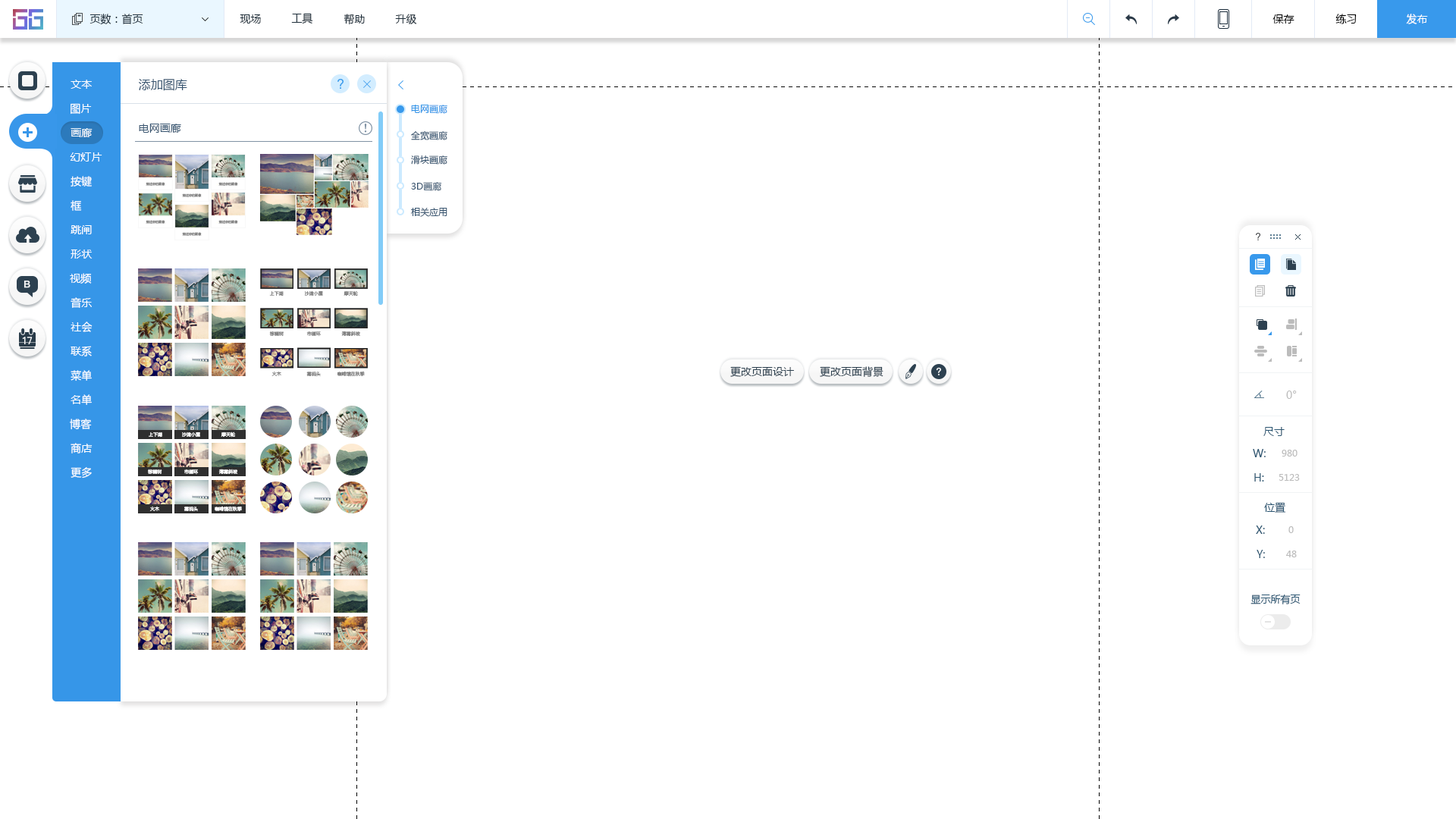
<style>
.page{position:relative;width:1456px;height:819px;background:#ffffff}
.page>*{position:absolute;margin:0}
.t1{font:10.6px "MicrosoftYaHei";color:#20303c}
.t2{font:10.6px "MicrosoftYaHei";color:#000000}
.t3{font:10.6px "MicrosoftYaHei";color:#ffffff}
.t4{font:12.1px "MicrosoftYaHei";color:#395671}
.t5{font:9.1px "MicrosoftYaHei";color:#3696e8}
.t6{font:10.6px "MicrosoftYaHei";color:#395671}
.t7{font:9.1px "MicrosoftYaHei";color:#395671}
.t8{font:3.1px "MicrosoftYaHei";color:#848484}
.t9{font:3px "MicrosoftYaHei";color:#848484}
.t10{font:4.5px "MicrosoftYaHei";color:#848484}
.t11{font:10.6px "MicrosoftYaHei";color:#2d4150}
.t12{font:10.6px "MicrosoftYaHei";color:#bcbcbc}
.t13{font:4.5px "MicrosoftYaHei";color:#fefefe}
.t14{font:10.6px "MicrosoftYaHei";color:#2b5672}
.t15{font:9.1px "MicrosoftYaHei";color:#bcbcbc}
.t16{font:9.9px "MicrosoftYaHei";color:#2b5672}
</style>
<div class="page">
<p class="t1" style="left:89px;top:14px;width:54px;height:11px">页数：首页</p>
<p class="t1" style="left:240px;top:14px;width:21px;height:10px">现场</p>
<p class="t1" style="left:291px;top:13px;width:22px;height:11px">工具</p>
<p class="t1" style="left:344px;top:14px;width:21px;height:11px">帮助</p>
<p class="t1" style="left:395px;top:14px;width:22px;height:10px">升级</p>
<p class="t2" style="left:1272px;top:14px;width:22px;height:10px">保存</p>
<p class="t2" style="left:1335px;top:14px;width:22px;height:10px">练习</p>
<p class="t3" style="left:1406px;top:14px;width:22px;height:10px">发布</p>
<p class="t3" style="left:71px;top:80px;width:21px;height:9px">文本</p>
<p class="t4" style="left:139px;top:79px;width:48px;height:12px">添加图库</p>
<p class="t3" style="left:71px;top:103px;width:21px;height:12px">图片</p>
<p class="t5" style="left:411px;top:105px;width:36px;height:9px">电网画廊</p>
<p class="t6" style="left:139px;top:124px;width:42px;height:9px">电网画廊</p>
<p class="t3" style="left:71px;top:128px;width:22px;height:9px">画廊</p>
<p class="t7" style="left:411px;top:131px;width:36px;height:9px">全宽画廊</p>
<p class="t3" style="left:70px;top:152px;width:32px;height:10px">幻灯片</p>
<p class="t7" style="left:411px;top:155px;width:36px;height:10px">滑块画廊</p>
<p class="t3" style="left:71px;top:176px;width:21px;height:11px">按键</p>
<p class="t8" style="left:146px;top:182px;width:19px;height:4px">描述你的图像</p>
<p class="t8" style="left:218px;top:182px;width:20px;height:4px">描述你的图像</p>
<p class="t7" style="left:411px;top:182px;width:31px;height:9px">3D画廊</p>
<p class="t8" style="left:182px;top:193px;width:20px;height:4px">描述你的图像</p>
<p class="t3" style="left:71px;top:200px;width:11px;height:11px">框</p>
<p class="t7" style="left:411px;top:208px;width:36px;height:9px">相关应用</p>
<p class="t9" style="left:146px;top:220px;width:19px;height:4px">描述你的图像</p>
<p class="t8" style="left:218px;top:220px;width:20px;height:4px">描述你的图像</p>
<p class="t3" style="left:71px;top:225px;width:21px;height:9px">跳闸</p>
<p class="t8" style="left:182px;top:232px;width:20px;height:4px">描述你的图像</p>
<p class="t3" style="left:71px;top:249px;width:22px;height:10px">形状</p>
<p class="t3" style="left:70px;top:273px;width:22px;height:11px">视频</p>
<p class="t10" style="left:269px;top:291px;width:15px;height:6px">上下湖</p>
<p class="t10" style="left:304px;top:291px;width:19px;height:5px">沙滩小屋</p>
<p class="t10" style="left:344px;top:290px;width:14px;height:7px">摩天轮</p>
<p class="t3" style="left:71px;top:297px;width:21px;height:11px">音乐</p>
<p class="t3" style="left:71px;top:322px;width:22px;height:10px">社会</p>
<p class="t10" style="left:269px;top:331px;width:15px;height:5px">棕榈树</p>
<p class="t10" style="left:306px;top:331px;width:15px;height:6px">市循环</p>
<p class="t10" style="left:341px;top:331px;width:19px;height:5px">薄雾斜坡</p>
<p class="t3" style="left:71px;top:346px;width:21px;height:10px">联系</p>
<p class="t3" style="left:71px;top:370px;width:21px;height:11px">菜单</p>
<p class="t10" style="left:271px;top:371px;width:10px;height:5px">火木</p>
<p class="t10" style="left:306px;top:372px;width:15px;height:4px">雾码头</p>
<p class="t10" style="left:337px;top:371px;width:28px;height:6px">咖啡馆在秋季</p>
<p class="t11" style="left:730px;top:366px;width:64px;height:11px">更改页面设计</p>
<p class="t11" style="left:820px;top:366px;width:63px;height:11px">更改页面背景</p>
<p class="t3" style="left:71px;top:394px;width:21px;height:11px">名单</p>
<p class="t12" style="left:1286px;top:391px;width:11px;height:8px">0°</p>
<p class="t3" style="left:70px;top:419px;width:22px;height:11px">博客</p>
<p class="t13" style="left:149px;top:432px;width:13px;height:6px">上下湖</p>
<p class="t13" style="left:182px;top:432px;width:18px;height:5px">沙滩小屋</p>
<p class="t13" style="left:221px;top:431px;width:15px;height:7px">摩天轮</p>
<p class="t14" style="left:1263px;top:427px;width:22px;height:9px">尺寸</p>
<p class="t3" style="left:71px;top:443px;width:22px;height:10px">商店</p>
<p class="t14" style="left:1253px;top:449px;width:13px;height:8px">W:</p>
<p class="t15" style="left:1282px;top:450px;width:15px;height:7px">980</p>
<p class="t3" style="left:71px;top:467px;width:21px;height:12px">更多</p>
<p class="t13" style="left:148px;top:469px;width:14px;height:5px">棕榈树</p>
<p class="t13" style="left:184px;top:469px;width:15px;height:6px">市循环</p>
<p class="t13" style="left:218px;top:469px;width:20px;height:5px">薄雾斜坡</p>
<p class="t14" style="left:1254px;top:473px;width:10px;height:9px">H:</p>
<p class="t15" style="left:1279px;top:474px;width:21px;height:7px">5123</p>
<p class="t13" style="left:149px;top:506px;width:11px;height:5px">火木</p>
<p class="t13" style="left:184px;top:507px;width:14px;height:4px">雾码头</p>
<p class="t13" style="left:215px;top:506px;width:27px;height:6px">咖啡馆在秋季</p>
<p class="t14" style="left:1264px;top:502px;width:22px;height:11px">位置</p>
<p class="t14" style="left:1256px;top:526px;width:9px;height:8px">X:</p>
<p class="t15" style="left:1288px;top:526px;width:6px;height:7px">0</p>
<p class="t14" style="left:1257px;top:550px;width:8px;height:8px">Y:</p>
<p class="t15" style="left:1286px;top:551px;width:11px;height:6px">48</p>
<p class="t16" style="left:1250px;top:594px;width:51px;height:10px">显示所有页</p>
</div>
